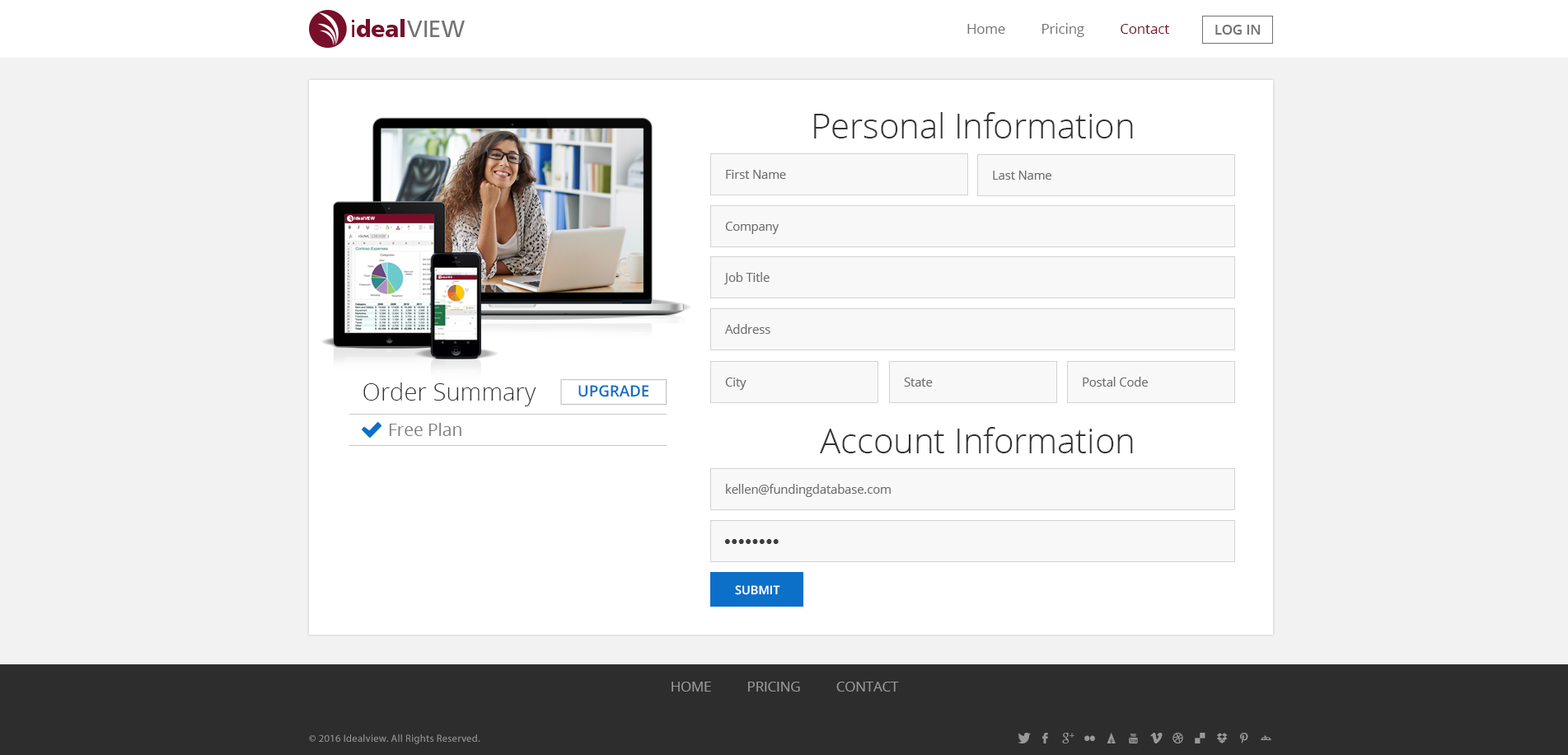
<style>
.page{position:relative;width:1568px;height:755px;background:#f2f2f2}
.page>*{position:absolute;margin:0}
.t1{font:13.7px "OpenSans";color:#737374}
.t2{font:13.7px "OpenSans";color:#780f2a}
.t3{font:13.7px "OpenSans-Semibold";color:#737374}
.t4{font:34.3px "OpenSans-Light";color:#343434}
.t5{font:12px "OpenSans";color:#6d6d6d}
.t6{font:24px "OpenSans-Light";color:#343434}
.t7{font:15.4px "OpenSans-Semibold";color:#0c6fc8;text-transform:uppercase}
.t8{font:17.2px "OpenSans";color:#818181}
.t9{font:12px "OpenSans-Semibold";color:#ffffff;text-transform:uppercase}
.t10{font:13.7px "OpenSans";color:#999999;text-transform:uppercase}
.t11{font:10.3px "MyriadPro-Regular";letter-spacing:0.025em;color:#999999}
</style>
<div class="page">
<p class="t1" style="left:967px;top:23px;width:202px;height:14px">Home          Pricing          <span class="t2">Contact</span></p>
<p class="t3" style="left:1215px;top:25px;width:46px;height:10px">LOG IN</p>
<p class="t4" style="left:814px;top:112px;width:319px;height:26px">Personal Information</p>
<p class="t5" style="left:726px;top:170px;width:60px;height:9px">First Name</p>
<p class="t5" style="left:993px;top:171px;width:58px;height:9px">Last Name</p>
<p class="t5" style="left:725px;top:222px;width:54px;height:12px">Company</p>
<p class="t5" style="left:723px;top:272px;width:47px;height:12px">Job Title</p>
<p class="t5" style="left:725px;top:324px;width:45px;height:10px">Address</p>
<p class="t5" style="left:725px;top:377px;width:22px;height:13px">City</p>
<p class="t5" style="left:904px;top:377px;width:29px;height:9px">State</p>
<p class="t5" style="left:1083px;top:377px;width:65px;height:9px">Postal Code</p>
<p class="t6" style="left:363px;top:382px;width:173px;height:24px">Order Summary</p>
<p class="t7" style="left:578px;top:385px;width:71px;height:12px">UPGRADE</p>
<p class="t8" style="left:389px;top:423px;width:72px;height:13px">Free Plan</p>
<p class="t4" style="left:820px;top:427px;width:313px;height:26px">Account Information</p>
<p class="t5" style="left:726px;top:484px;width:165px;height:13px">kellen@fundingdatabase.com</p>
<p class="t9" style="left:735px;top:585px;width:45px;height:10px">Submit</p>
<p class="t10" style="left:672px;top:681px;width:227px;height:10px">Home          Pricing          Contact</p>
<p class="t11" style="left:309px;top:734px;width:171px;height:10px">© 2016 Idealview. All Rights Reserved.</p>
</div>
